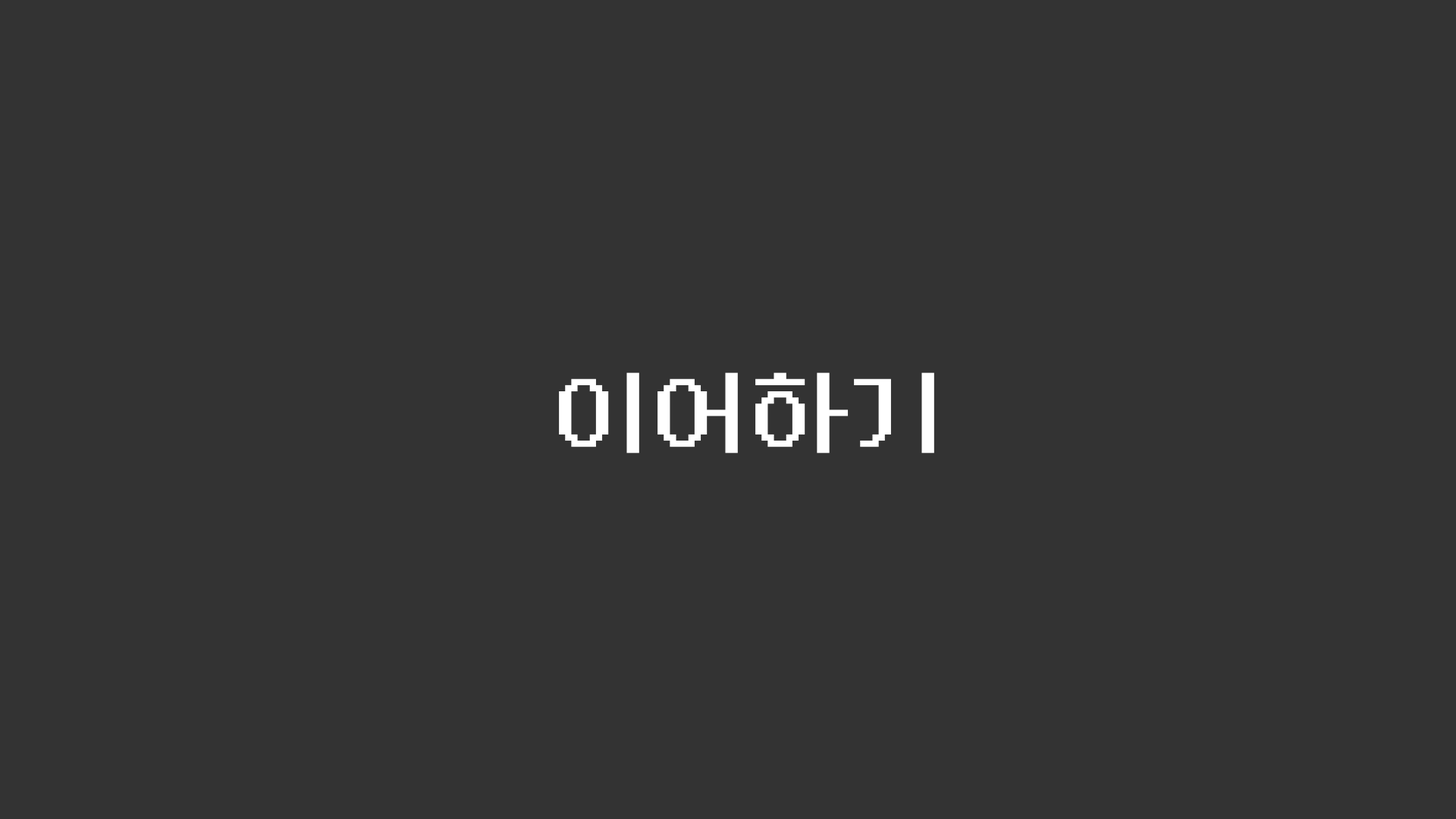
<style>
.page{position:relative;width:1456px;height:819px;background:#333333}
.page>*{position:absolute;margin:0}
.t1{font:98.2px "NeoDunggeunmo-Regular";color:#ffffff}
</style>
<div class="page">
<p class="t1" style="left:559px;top:372px;width:375px;height:81px">이어하기</p>
</div>
